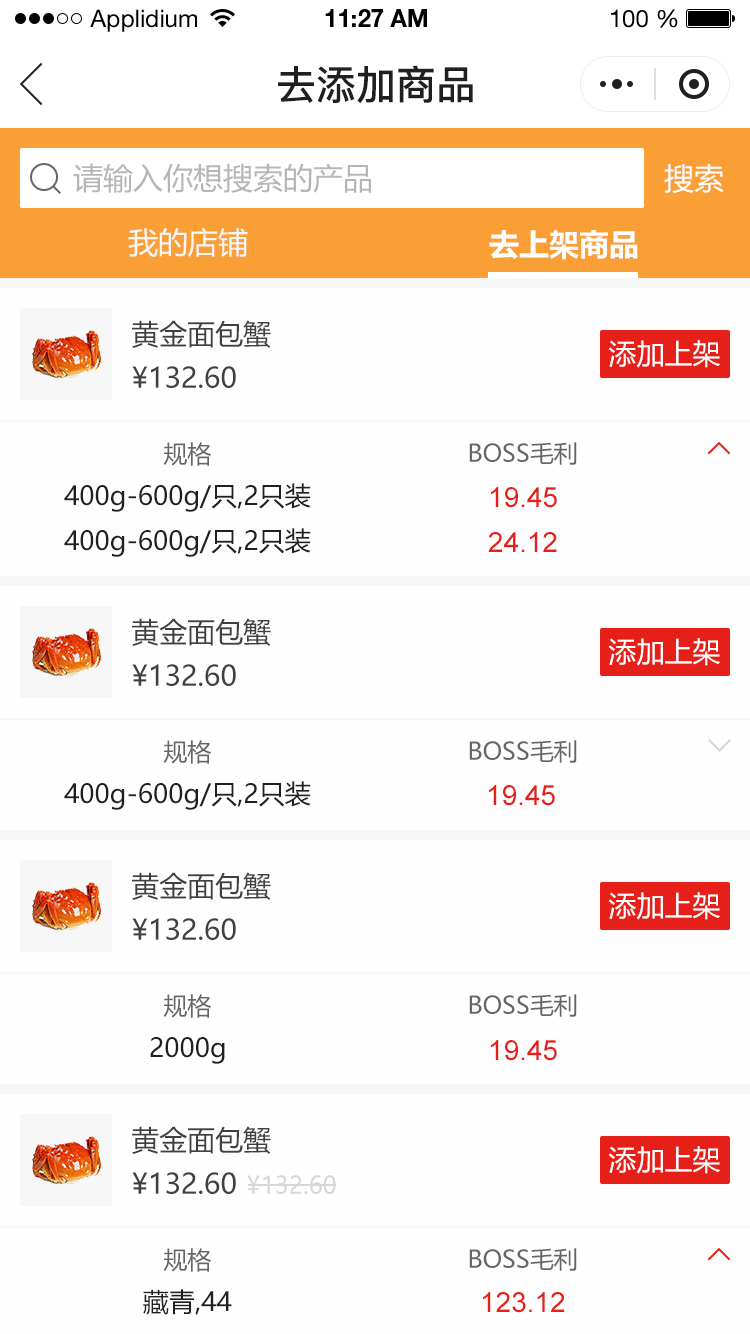
<style>
.page{position:relative;width:750px;height:1334px;background:#fefefe}
.page>*{position:absolute;margin:0}
.t1{font:24px "HelveticaNeueLTStd-Roman";color:#000000}
.t2{font:24px "HelveticaNeueLTStd-Bd";color:#000000}
.t3{font:40px "PingFang-SC-Bold";color:#202020;text-transform:uppercase}
.t4{font:30px "MicrosoftYaHei";color:#b6b6b6;text-transform:uppercase}
.t5{font:30px "MicrosoftYaHei";color:#ffffff;text-transform:uppercase}
.t6{font:30px "MicrosoftYaHei";color:#f5f5f5;text-transform:uppercase}
.t7{font:30px "MicrosoftYaHei-Bold";color:#fefefe;text-transform:uppercase}
.t8{font:28px "MicrosoftYaHei";color:#404040;text-transform:uppercase}
.t9{font:28px "MicrosoftYaHei";color:#fefefe;text-transform:uppercase}
.t10{font:24px "MicrosoftYaHei";color:#666666;text-transform:uppercase}
.t11{font:26px "MicrosoftYaHei";color:#202020}
.t12{font:28px "ArialMT";color:#e61f18}
.t13{font:24px "MicrosoftYaHei";color:#d6d6d6;text-transform:uppercase}
</style>
<div class="page">
<p class="t1" style="left:90px;top:9px;width:107px;height:23px">Applidium</p>
<p class="t2" style="left:325px;top:9px;width:102px;height:18px">11:27 AM</p>
<p class="t1" style="left:611px;top:9px;width:67px;height:19px">100 %</p>
<p class="t3" style="left:278px;top:65px;width:195px;height:38px">去添加商品</p>
<p class="t4" style="left:73px;top:163px;width:298px;height:30px">请输入你想搜索的产品</p>
<p class="t5" style="left:664px;top:164px;width:60px;height:29px">搜索</p>
<p class="t6" style="left:128px;top:227px;width:120px;height:30px">我的店铺</p>
<p class="t7" style="left:489px;top:230px;width:149px;height:30px">去上架商品</p>
<p class="t8" style="left:132px;top:320px;width:139px;height:28px">黄金面包蟹</p>
<p class="t9" style="left:608px;top:340px;width:112px;height:28px">添加上架</p>
<p class="t8" style="left:132px;top:366px;width:104px;height:22px">¥132.60</p>
<p class="t10" style="left:163px;top:442px;width:48px;height:24px">规格</p>
<p class="t10" style="left:469px;top:442px;width:108px;height:23px">BOSS毛利</p>
<p class="t11" style="left:64px;top:483px;width:247px;height:29px">400g-600g/只,2只装</p>
<p class="t12" style="left:491px;top:487px;width:66px;height:21px">19.45</p>
<p class="t11" style="left:64px;top:528px;width:247px;height:29px">400g-600g/只,2只装</p>
<p class="t12" style="left:488px;top:532px;width:69px;height:20px">24.12</p>
<p class="t8" style="left:132px;top:618px;width:139px;height:28px">黄金面包蟹</p>
<p class="t9" style="left:608px;top:638px;width:112px;height:28px">添加上架</p>
<p class="t8" style="left:132px;top:664px;width:104px;height:22px">¥132.60</p>
<p class="t10" style="left:163px;top:740px;width:48px;height:24px">规格</p>
<p class="t10" style="left:469px;top:740px;width:108px;height:23px">BOSS毛利</p>
<p class="t11" style="left:64px;top:781px;width:247px;height:29px">400g-600g/只,2只装</p>
<p class="t12" style="left:489px;top:785px;width:66px;height:21px">19.45</p>
<p class="t8" style="left:132px;top:872px;width:139px;height:28px">黄金面包蟹</p>
<p class="t9" style="left:608px;top:892px;width:112px;height:28px">添加上架</p>
<p class="t8" style="left:132px;top:918px;width:104px;height:22px">¥132.60</p>
<p class="t10" style="left:163px;top:994px;width:48px;height:24px">规格</p>
<p class="t10" style="left:469px;top:994px;width:108px;height:23px">BOSS毛利</p>
<p class="t11" style="left:150px;top:1037px;width:75px;height:27px">2000g</p>
<p class="t12" style="left:491px;top:1040px;width:66px;height:21px">19.45</p>
<p class="t8" style="left:132px;top:1126px;width:139px;height:28px">黄金面包蟹</p>
<p class="t9" style="left:608px;top:1146px;width:112px;height:28px">添加上架</p>
<p class="t8" style="left:132px;top:1172px;width:104px;height:22px">¥132.60</p>
<p class="t13" style="left:247px;top:1175px;width:89px;height:19px">¥132.60</p>
<p class="t10" style="left:163px;top:1248px;width:48px;height:24px">规格</p>
<p class="t10" style="left:469px;top:1248px;width:108px;height:23px">BOSS毛利</p>
<p class="t11" style="left:143px;top:1289px;width:89px;height:26px">藏青,44</p>
<p class="t12" style="left:483px;top:1292px;width:82px;height:21px">123.12</p>
</div>
